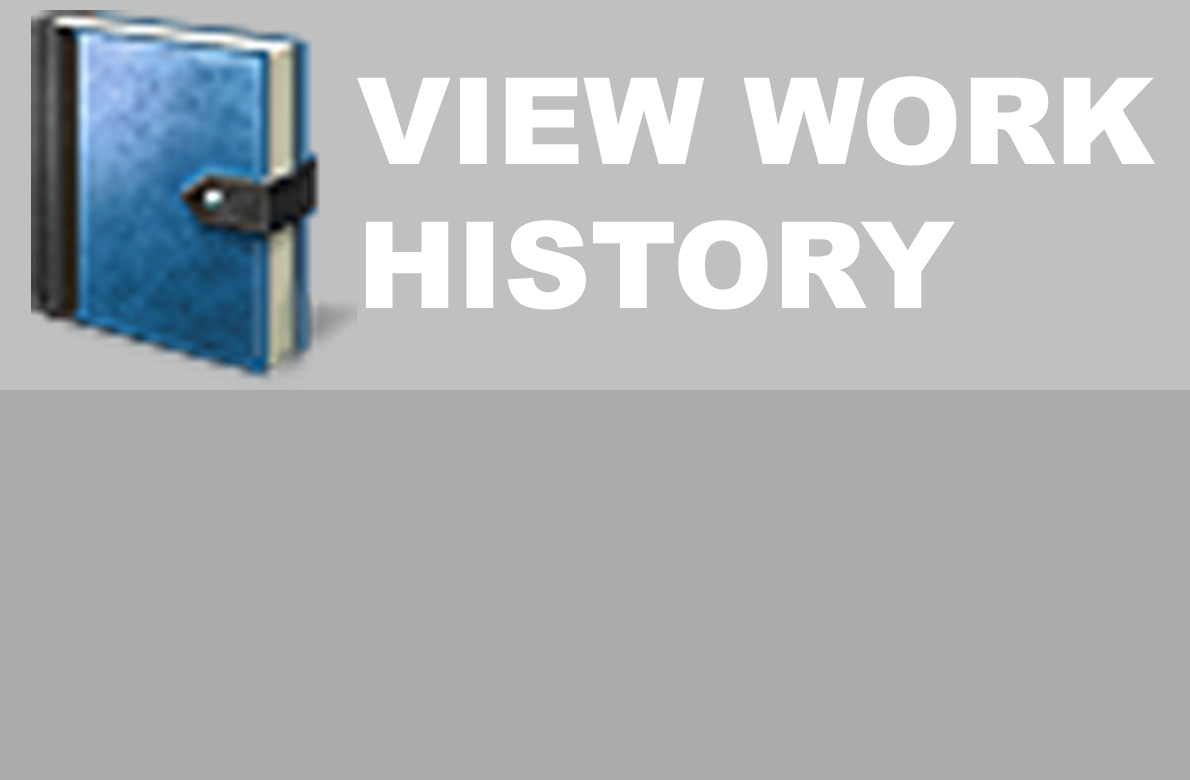
<style>
.page{position:relative;width:1190px;height:780px;background:#aaaaaa}
.page>*{position:absolute;margin:0}
.t1{font:120px "Arial-Black";color:#ffffff}
</style>
<div class="page">
<p class="t1" style="left:357px;top:76px;width:798px;height:234px">VIEW WORK <br>HISTORY</p>
</div>
